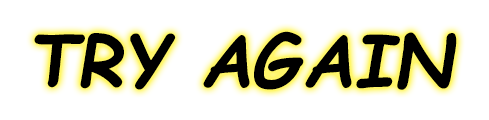
<style>
.page{position:relative;width:489px;height:120px;background:#ffffff}
.page>*{position:absolute;margin:0}
.t1{font:72px "ComicSansMS-BoldItalic";color:#000000}
</style>
<div class="page">
<p class="t1" style="left:34px;top:31px;width:423px;height:59px">TRY AGAIN</p>
</div>
